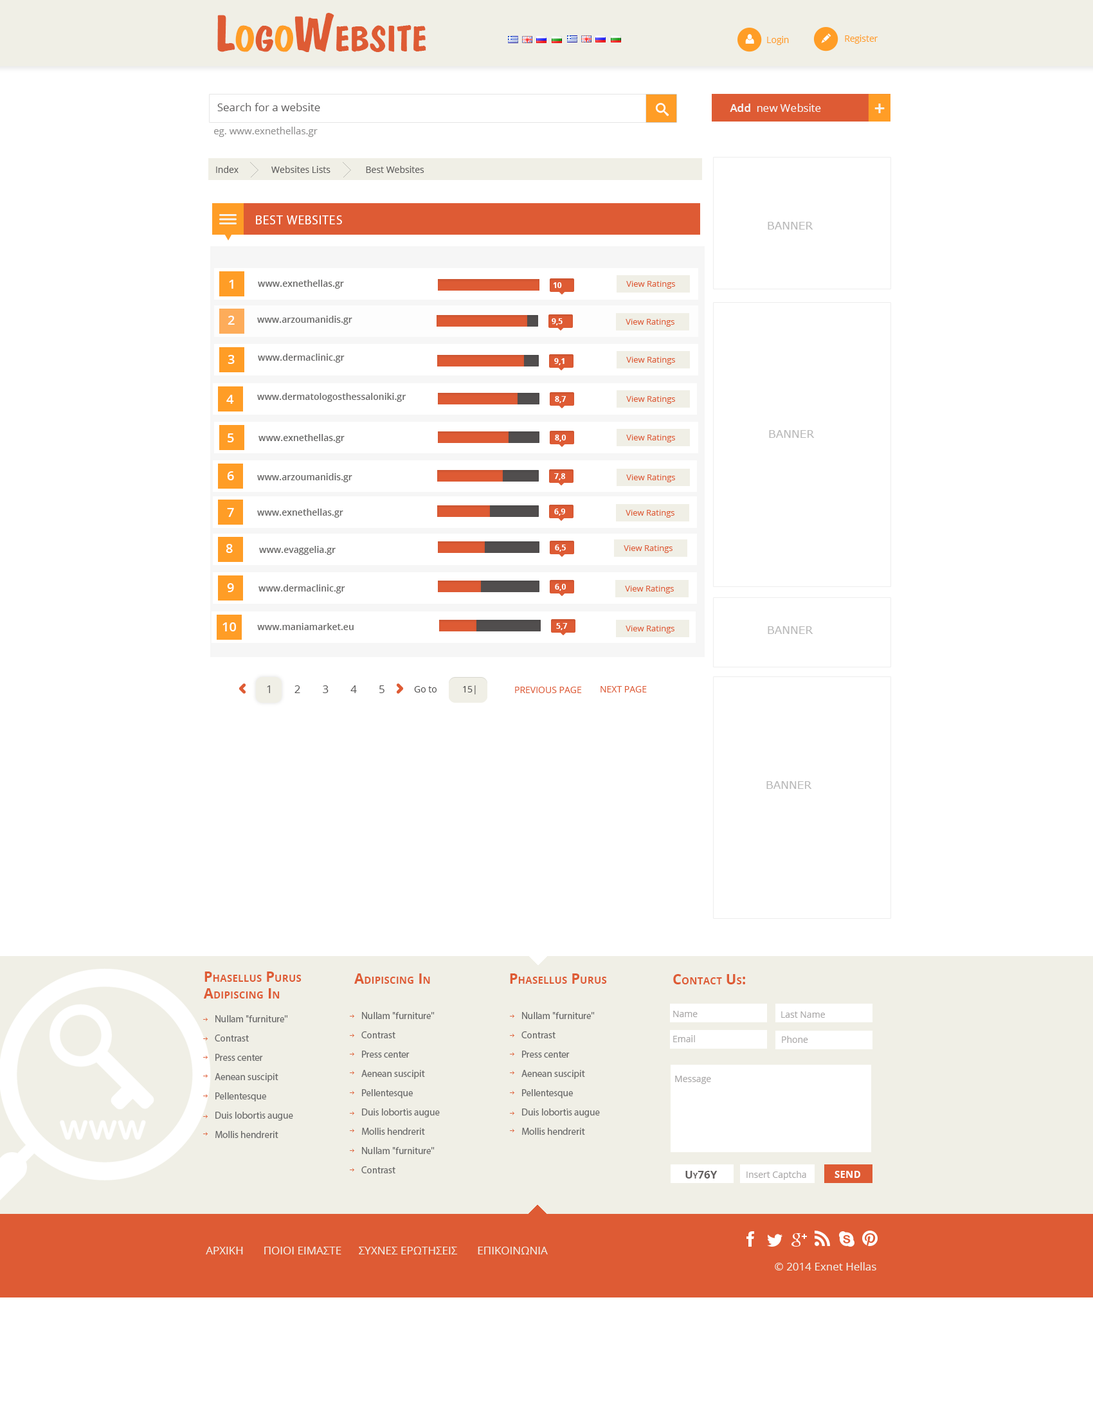
<style>
.page{position:relative;width:1093px;height:1428px;background:#ffffff}
.page>*{position:absolute;margin:0}
.t1{font:51.4px "DomkratBold";color:#de5b34;font-variant:small-caps}
.t2{font:51.4px "DomkratBold";color:#ff9d26;font-variant:small-caps}
.t3{font:9px "OpenSans";color:#ff9d26}
.t4{font:10.9px "OpenSans";color:#5e5d5d}
.t5{font:10.9px "OpenSans";color:#f5f5f5}
.t6{font:10.9px "OpenSans-Semibold";color:#f5f5f5}
.t7{font:14.1px "Verdana-Bold";color:#f5f5f5}
.t8{font:9.6px "OpenSans";color:#919090}
.t9{font:9px "OpenSans";color:#5e5d5d}
.t10{font:12.9px "MyriadPro-Regular";letter-spacing:0.04em;color:#ffffff;text-transform:uppercase}
.t11{font:10.9px "Verdana";color:#b8b8b8;text-transform:uppercase}
.t12{font:12.9px "OpenSans-Semibold";color:#ffffff}
.t13{font:9px "OpenSans-Semibold";color:#666564}
.t14{font:8.4px "OpenSans";color:#de5b34}
.t15{font:7.7px "OpenSans-Bold";color:#ffffff}
.t16{font:10.9px "OpenSans";letter-spacing:2em;color:#545353}
.t17{font:9px "OpenSans";color:#545353}
.t18{font:9px "OpenSans";color:#de5b34}
.t19{font:14.1px "OpenSans-Bold";color:#de5b34;font-variant:small-caps}
.t20{font:9.6px/19.3px "MyriadPro-Regular";color:#6b6b6b}
.t21{font:9px "OpenSans";color:#a9a7a7}
.t22{font:10.9px "OpenSans-Bold";color:#625f5f;font-variant:small-caps}
.t23{font:14.1px "OpenSans-Bold";color:#ffffff;font-variant:small-caps}
.t24{font:10.9px "OpenSans";color:#f0efe6}
</style>
<div class="page">
<p class="t1" style="left:217px;top:13px;width:209px;height:39px">L<span class="t2">o</span>g<span class="t2">o</span>Website</p>
<p class="t3" style="left:767px;top:36px;width:22px;height:9px">Login</p>
<p class="t3" style="left:845px;top:35px;width:33px;height:9px">Register</p>
<p class="t4" style="left:217px;top:103px;width:103px;height:8px">Search for a website</p>
<p class="t5" style="left:730px;top:104px;width:91px;height:8px"><span class="t6">Add </span> new Website</p>
<p class="t7" style="left:874px;top:104px;width:11px;height:9px">+</p>
<p class="t8" style="left:214px;top:127px;width:104px;height:10px">eg. www.exnethellas.gr</p>
<p class="t9" style="left:216px;top:166px;width:208px;height:7px">Index              Websites Lists               Best Websites</p>
<p class="t10" style="left:256px;top:215px;width:86px;height:9px">best Websites</p>
<p class="t11" style="left:768px;top:222px;width:45px;height:8px">BANNER</p>
<p class="t12" style="left:229px;top:280px;width:4px;height:9px">1</p>
<p class="t13" style="left:258px;top:280px;width:86px;height:9px">www.exnethellas.gr</p>
<p class="t14" style="left:626px;top:281px;width:49px;height:8px">View Ratings</p>
<p class="t15" style="left:553px;top:282px;width:9px;height:6px">10</p>
<p class="t12" style="left:228px;top:316px;width:7px;height:9px">2</p>
<p class="t13" style="left:257px;top:316px;width:95px;height:9px">www.arzoumanidis.gr</p>
<p class="t15" style="left:552px;top:318px;width:10px;height:7px">9,5</p>
<p class="t14" style="left:626px;top:319px;width:48px;height:8px">View Ratings</p>
<p class="t13" style="left:258px;top:354px;width:87px;height:9px">www.dermaclinic.gr</p>
<p class="t12" style="left:228px;top:355px;width:7px;height:9px">3</p>
<p class="t15" style="left:554px;top:358px;width:10px;height:7px">9,1</p>
<p class="t14" style="left:626px;top:357px;width:49px;height:7px">View Ratings</p>
<p class="t12" style="left:226px;top:395px;width:8px;height:9px">4</p>
<p class="t13" style="left:257px;top:393px;width:149px;height:9px">www.dermatologosthessaloniki.gr</p>
<p class="t15" style="left:555px;top:396px;width:11px;height:7px">8,7</p>
<p class="t14" style="left:626px;top:396px;width:49px;height:8px">View Ratings</p>
<p class="t12" style="left:228px;top:433px;width:6px;height:9px">5</p>
<p class="t13" style="left:258px;top:434px;width:87px;height:9px">www.exnethellas.gr</p>
<p class="t15" style="left:555px;top:435px;width:11px;height:7px">8,0</p>
<p class="t14" style="left:626px;top:435px;width:49px;height:7px">View Ratings</p>
<p class="t11" style="left:769px;top:430px;width:46px;height:8px">BANNER</p>
<p class="t12" style="left:227px;top:471px;width:7px;height:9px">6</p>
<p class="t13" style="left:257px;top:473px;width:95px;height:9px">www.arzoumanidis.gr</p>
<p class="t15" style="left:554px;top:473px;width:11px;height:7px">7,8</p>
<p class="t14" style="left:626px;top:474px;width:49px;height:8px">View Ratings</p>
<p class="t12" style="left:227px;top:508px;width:7px;height:9px">7</p>
<p class="t13" style="left:257px;top:509px;width:86px;height:9px">www.exnethellas.gr</p>
<p class="t15" style="left:554px;top:509px;width:11px;height:7px">6,9</p>
<p class="t14" style="left:626px;top:510px;width:48px;height:8px">View Ratings</p>
<p class="t12" style="left:226px;top:544px;width:7px;height:9px">8</p>
<p class="t13" style="left:259px;top:546px;width:77px;height:9px">www.evaggelia.gr</p>
<p class="t15" style="left:555px;top:544px;width:11px;height:8px">6,5</p>
<p class="t14" style="left:624px;top:545px;width:48px;height:8px">View Ratings</p>
<p class="t12" style="left:227px;top:583px;width:7px;height:9px">9</p>
<p class="t13" style="left:258px;top:584px;width:87px;height:9px">www.dermaclinic.gr</p>
<p class="t15" style="left:555px;top:584px;width:11px;height:7px">6,0</p>
<p class="t14" style="left:625px;top:586px;width:49px;height:7px">View Ratings</p>
<p class="t12" style="left:222px;top:622px;width:14px;height:9px">10</p>
<p class="t13" style="left:257px;top:623px;width:97px;height:7px">www.maniamarket.eu</p>
<p class="t15" style="left:556px;top:623px;width:12px;height:7px">5,7</p>
<p class="t14" style="left:626px;top:626px;width:48px;height:7px">View Ratings</p>
<p class="t11" style="left:768px;top:626px;width:45px;height:8px">BANNER</p>
<p class="t16" style="left:267px;top:685px;width:117px;height:8px">12345</p>
<p class="t17" style="left:414px;top:686px;width:23px;height:6px">Go to</p>
<p class="t17" style="left:463px;top:685px;width:13px;height:9px">15|</p>
<p class="t18" style="left:515px;top:687px;width:67px;height:6px">PREVIOUS PAGE</p>
<p class="t18" style="left:600px;top:686px;width:47px;height:6px">NEXT PAGE</p>
<p class="t11" style="left:766px;top:781px;width:46px;height:8px">BANNER</p>
<p class="t19" style="left:203px;top:971px;width:99px;height:27px">Phasellus Purus <br> Adipiscing In</p>
<p class="t19" style="left:354px;top:973px;width:76px;height:11px">Adipiscing In</p>
<p class="t19" style="left:510px;top:973px;width:97px;height:11px">Phasellus Purus</p>
<p class="t19" style="left:673px;top:974px;width:72px;height:10px">Contact Us:</p>
<p class="t20" style="left:361px;top:1012px;width:79px;height:161px">Nullam "furniture"<br>Contrast<br>Press center<br>Aenean suscipit<br>Pellentesque<br>Duis lobortis augue <br>Mollis hendrerit<br>Nullam "furniture"<br>Contrast</p>
<p class="t20" style="left:521px;top:1012px;width:79px;height:123px">Nullam "furniture"<br>Contrast<br>Press center<br>Aenean suscipit<br>Pellentesque<br>Duis lobortis augue <br>Mollis hendrerit</p>
<p class="t21" style="left:673px;top:1011px;width:25px;height:6px">Name</p>
<p class="t21" style="left:781px;top:1011px;width:44px;height:7px">Last Name</p>
<p class="t20" style="left:215px;top:1015px;width:78px;height:123px">Nullam "furniture"<br>Contrast<br>Press center<br>Aenean suscipit<br>Pellentesque<br>Duis lobortis augue <br>Mollis hendrerit</p>
<p class="t21" style="left:673px;top:1035px;width:22px;height:7px">Email</p>
<p class="t21" style="left:782px;top:1036px;width:26px;height:7px">Phone</p>
<p class="t21" style="left:675px;top:1076px;width:36px;height:8px">Message</p>
<p class="t22" style="left:685px;top:1171px;width:32px;height:7px">Uy76Y</p>
<p class="t21" style="left:746px;top:1171px;width:60px;height:9px">Insert Captcha</p>
<p class="t23" style="left:834px;top:1171px;width:26px;height:7px">send</p>
<p class="t24" style="left:206px;top:1246px;width:342px;height:8px">ΑΡΧΙΚΗ       ΠΟΙΟΙ ΕΙΜΑΣΤΕ      ΣΥΧΝΕΣ ΕΡΩΤΗΣΕΙΣ       ΕΠΙΚΟΙΝΩΝΙΑ</p>
<p class="t24" style="left:775px;top:1262px;width:101px;height:8px">© 2014 Exnet Hellas</p>
</div>
